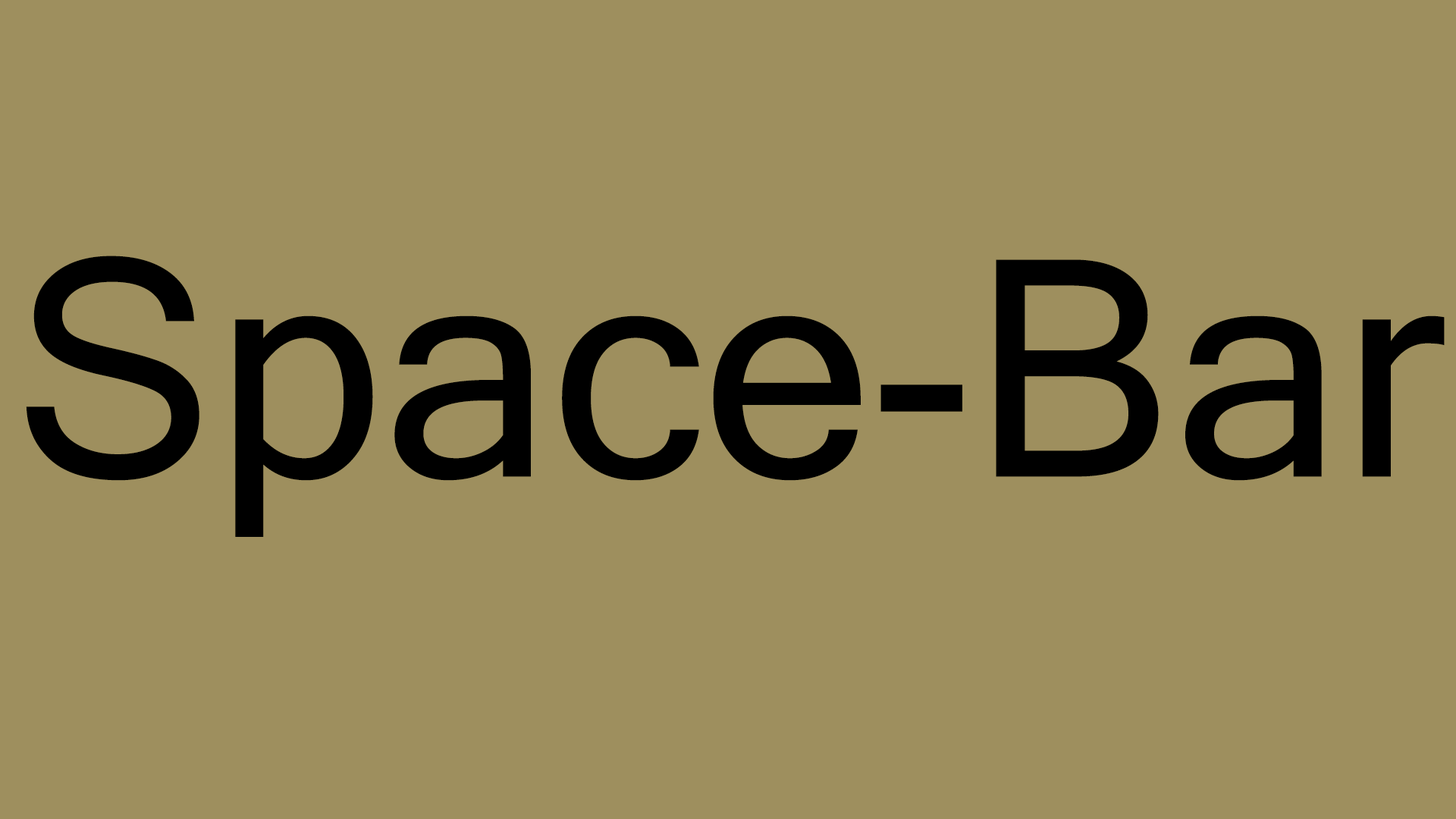
<style>
.page{position:relative;width:1456px;height:819px;background:#9e8f5e}
.page>*{position:absolute;margin:0}
.t1{font:302.7px "MicrosoftSansSerif";color:#000000}
</style>
<div class="page">
<p class="t1" style="left:26px;top:256px;width:1419px;height:281px">Space-Bar</p>
</div>
